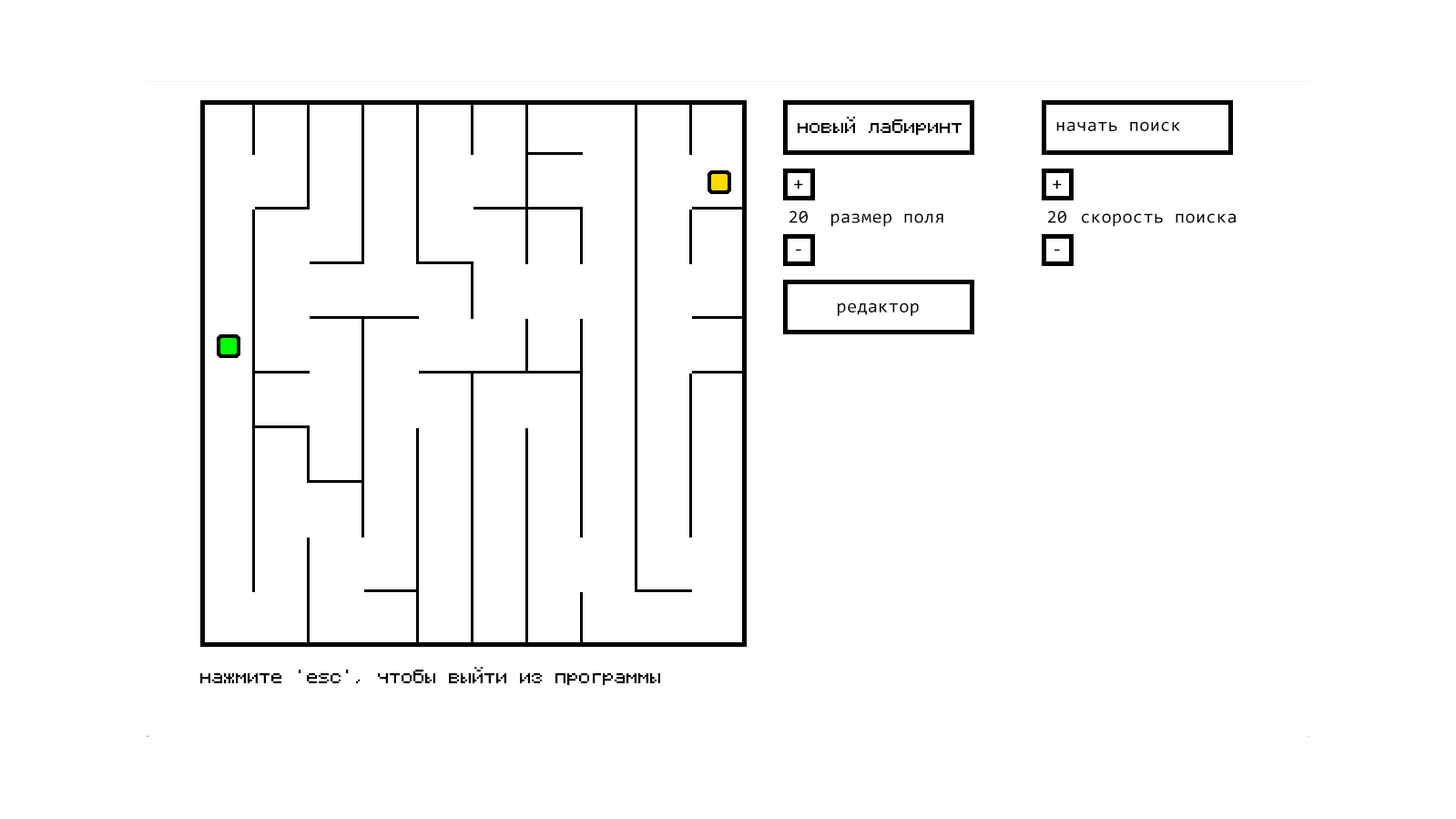
<style>
.page{position:relative;width:1456px;height:819px;background:#ffffff}
.page>*{position:absolute;margin:0}
.t1{font:18.2px "Consolas";letter-spacing:0.025em;color:#000000}
</style>
<div class="page">
<p class="t1" style="left:1057px;top:121px;width:123px;height:10px">начать поиск</p>
<p class="t1" style="left:794px;top:179px;width:9px;height:10px">+</p>
<p class="t1" style="left:1053px;top:179px;width:9px;height:10px">+</p>
<p class="t1" style="left:790px;top:210px;width:18px;height:13px">20</p>
<p class="t1" style="left:832px;top:213px;width:112px;height:14px">размер поля</p>
<p class="t1" style="left:1048px;top:210px;width:19px;height:13px">20</p>
<p class="t1" style="left:1082px;top:213px;width:154px;height:14px">скорость поиска</p>
<p class="t1" style="left:796px;top:249px;width:5px;height:2px">-</p>
<p class="t1" style="left:1055px;top:249px;width:5px;height:2px">-</p>
<p class="t1" style="left:838px;top:302px;width:81px;height:14px">редактор</p>
</div>
